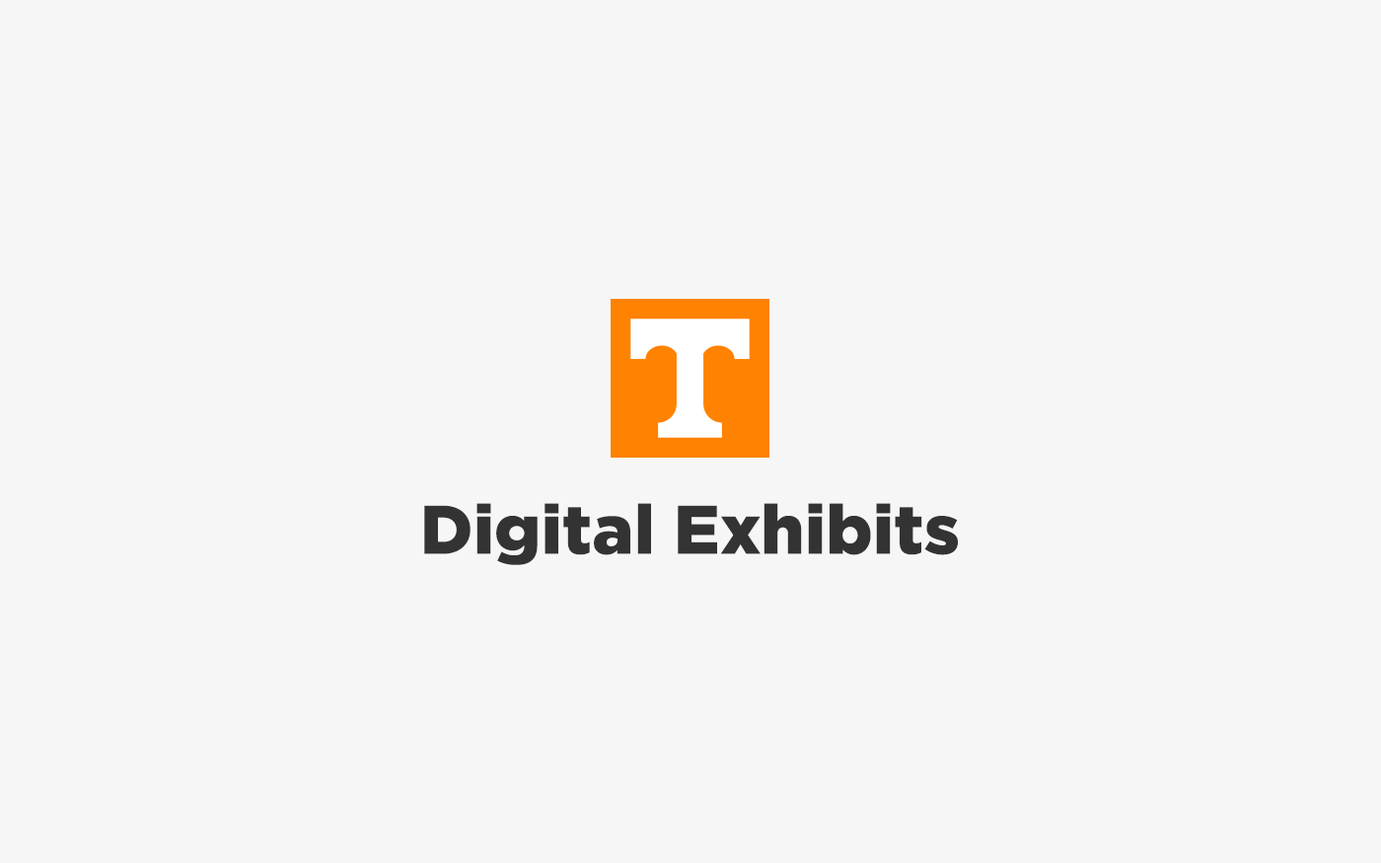
<style>
.page{position:relative;width:1381px;height:863px;background:#f6f6f6}
.page>*{position:absolute;margin:0}
.t1{font:68.6px "Gotham-Black";color:#333333}
</style>
<div class="page">
<p class="t1" style="left:424px;top:503px;width:534px;height:62px">Digital Exhibits</p>
</div>
